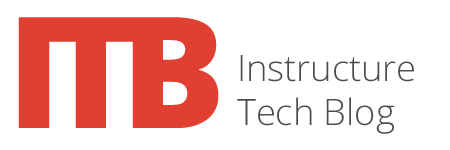
<style>
.page{position:relative;width:450px;height:150px;background:#ffffff}
.page>*{position:absolute;margin:0}
.t1{font:155.2px "OpenSans-Extrabold";color:#e13f32}
.t2{font:36.2px "OpenSans-Light";color:#4d4d4d}
</style>
<div class="page">
<p class="t1" style="left:18px;top:17px;width:32px;height:111px">I</p>
<p class="t1" style="left:48px;top:17px;width:85px;height:111px">T</p>
<p class="t1" style="left:132px;top:17px;width:87px;height:111px">B</p>
<p class="t2" style="left:237px;top:55px;width:177px;height:79px">Instructure<br>Tech Blog</p>
</div>
